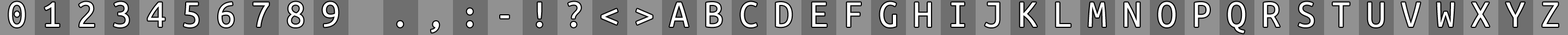
<style>
.page{position:relative;width:1568px;height:35px;background:#6f6f6f}
.page>*{position:absolute;margin:0}
.t1{font:39.2px "UbuntuMono-Regular";letter-spacing:0.389em;color:#ffffff}
</style>
<div class="page">
<p class="t1" style="left:9px;top:2px;width:1549px;height:31px">0123456789 .,:-!?&lt;&gt;ABCDEFGHIJKLMNOPQRSTUVWXYZ</p>
</div>
